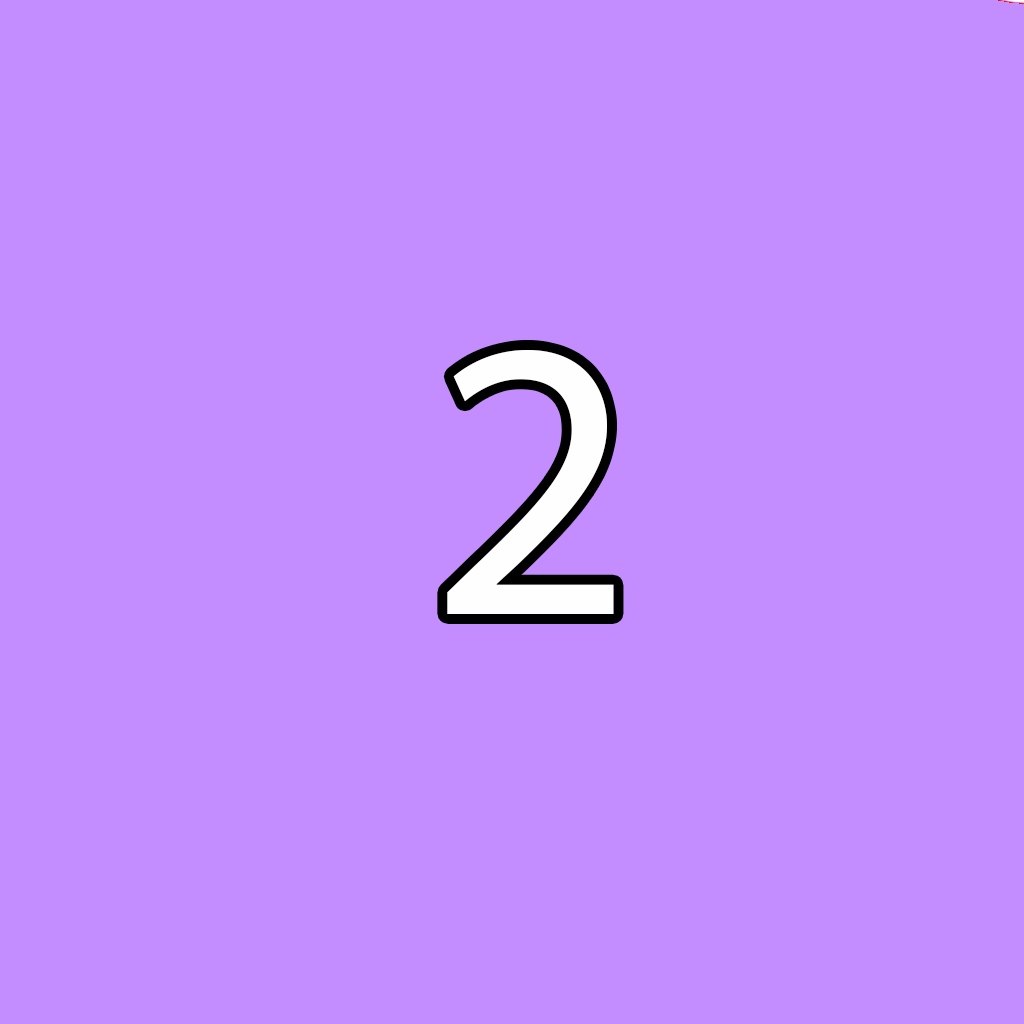
<style>
.page{position:relative;width:1024px;height:1024px;background:#c38dff}
.page>*{position:absolute;margin:0}
.t1{font:400px "MyriadPro-Regular";color:#fefeff}
</style>
<div class="page">
<p class="t1" style="left:447px;top:349px;width:167px;height:265px">2</p>
</div>
